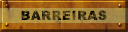
<style>
.page{position:relative;width:128px;height:32px}
.page>*{position:absolute;margin:0}
.t1{font:12.6px "Arial-Black";letter-spacing:0.045em;text-transform:uppercase}
</style>
<div class="page">
<p class="t1" style="left:21px;top:10px;width:86px;height:10px">Barreiras</p>
</div>
